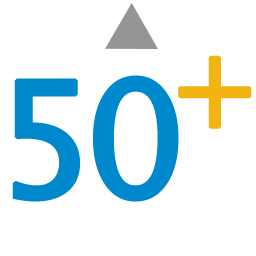
<style>
.page{position:relative;width:256px;height:256px;background:#ffffff}
.page>*{position:absolute;margin:0}
.t1{font:120px "LucidaGrande";letter-spacing:-0.1em;color:#f1b410;font-weight:bold}
.t2{font:160px "LucidaGrande";letter-spacing:-0.1em;color:#0088cc;font-weight:bold}
</style>
<div class="page">
<p class="t1" style="left:178px;top:55px;width:74px;height:74px">+</p>
<p class="t2" style="left:12px;top:75px;width:167px;height:127px">50</p>
</div>
